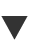
<style>
.page{position:relative;width:30px;height:50px;background:#ffffff}
.page>*{position:absolute;margin:0}
.t1{font:40px "Menlo-Bold";letter-spacing:0.007em;color:#333333;scale:1.1 1}
</style>
<div class="page">
<p class="t1" style="left:1px;top:16px;width:27px;height:24px">▼</p>
</div>
